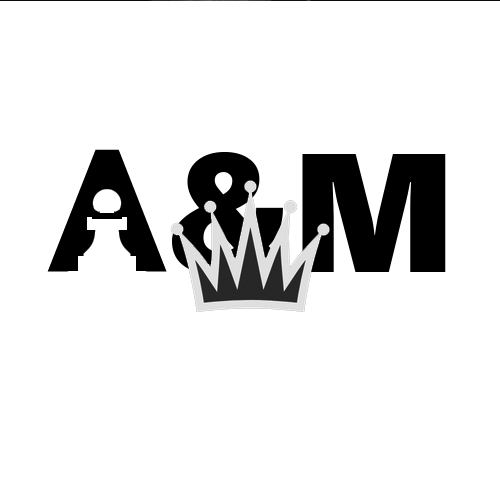
<style>
.page{position:relative;width:500px;height:500px;background:#ffffff}
.page>*{position:absolute;margin:0}
.t1{font:168px "SegoeUIBlack";color:#000000}
</style>
<div class="page">
<p class="t1" style="left:172px;top:151px;width:274px;height:122px">&amp;M</p>
</div>
